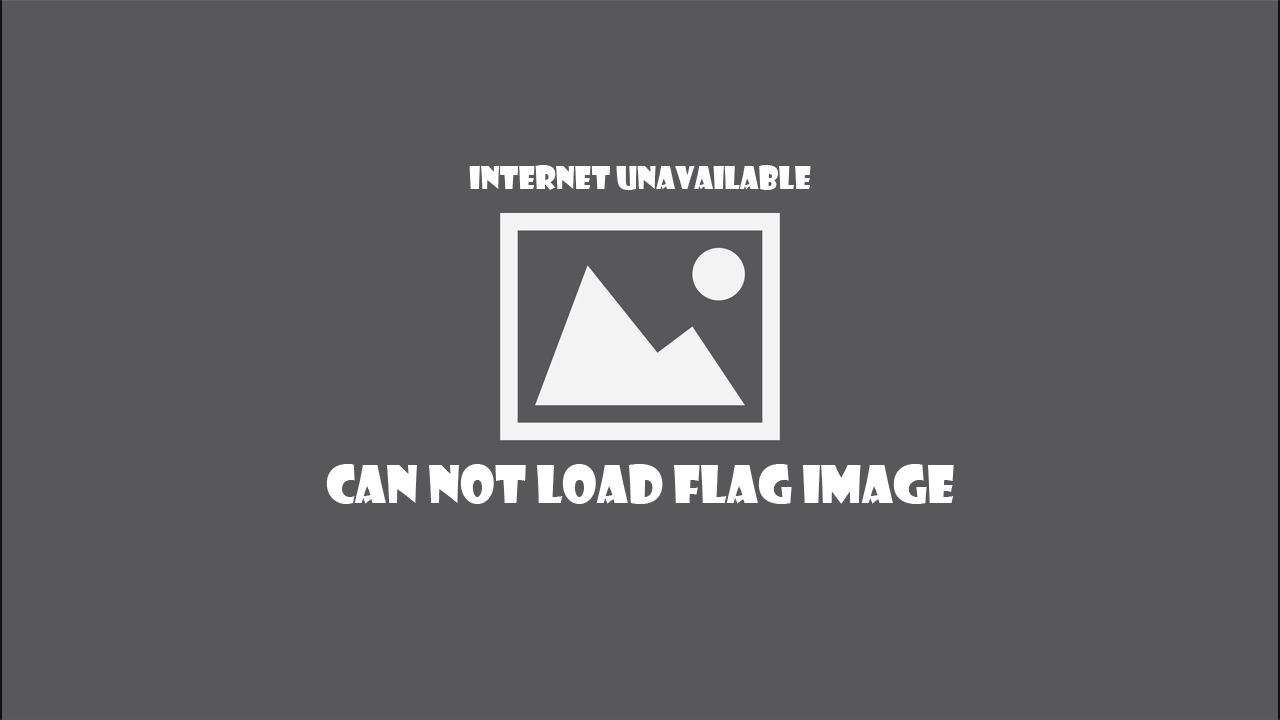
<style>
.page{position:relative;width:1280px;height:720px;background:#58585a}
.page>*{position:absolute;margin:0}
.t1{font:30px "ShowcardGothic-Reg";color:#ffffff}
.t2{font:50px "ShowcardGothic-Reg";color:#ffffff}
</style>
<div class="page">
<p class="t1" style="left:469px;top:165px;width:342px;height:25px">internet unavailable</p>
<p class="t2" style="left:326px;top:464px;width:628px;height:40px">CAN NOT LOAD FLAG IMAGE</p>
</div>
